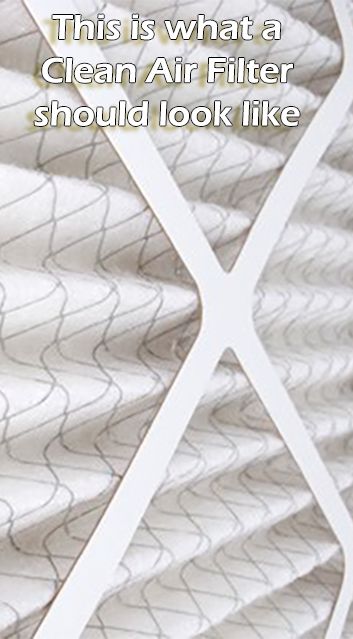
<style>
.page{position:relative;width:353px;height:639px}
.page>*{position:absolute;margin:0}
.t1{font:36px "ErasITC-Demi";color:#ffffff}
</style>
<div class="page">
<p class="t1" style="left:34px;top:14px;width:266px;height:112px;text-align:center">This is what a<br>Clean Air Filter<br>should look like</p>
</div>
